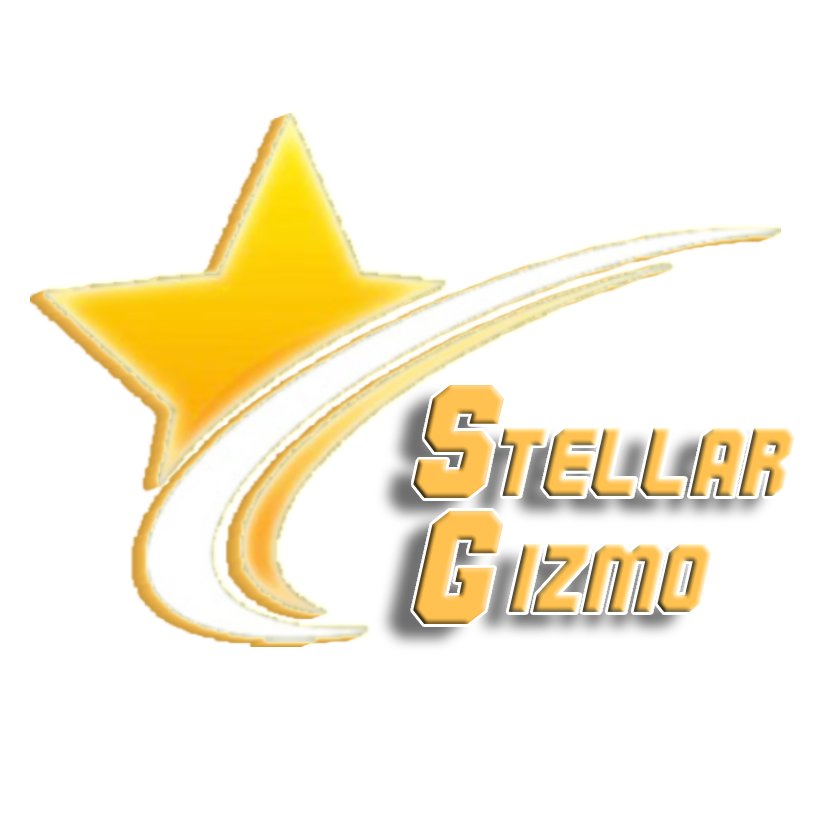
<style>
.page{position:relative;width:826px;height:826px;background:#ffffff}
.page>*{position:absolute;margin:0}
.t1{font:161.3px "Commando";color:#ffc14f}
.t2{font:101.4px "Commando"}
</style>
<div class="page">
<p class="t1" style="left:413px;top:385px;width:92px;height:113px">S</p>
<p class="t2" style="left:500px;top:428px;width:295px;height:184px">TELLAR<br> iZMO</p>
<p class="t1" style="left:413px;top:511px;width:91px;height:113px">G</p>
</div>
